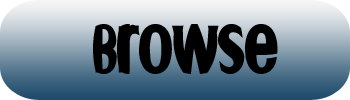
<style>
.page{position:relative;width:350px;height:100px}
.page>*{position:absolute;margin:0}
.t1{font:50px "Fishbowl";color:#000000}
</style>
<div class="page">
<p class="t1" style="left:93px;top:24px;width:185px;height:50px">Browse</p>
</div>
